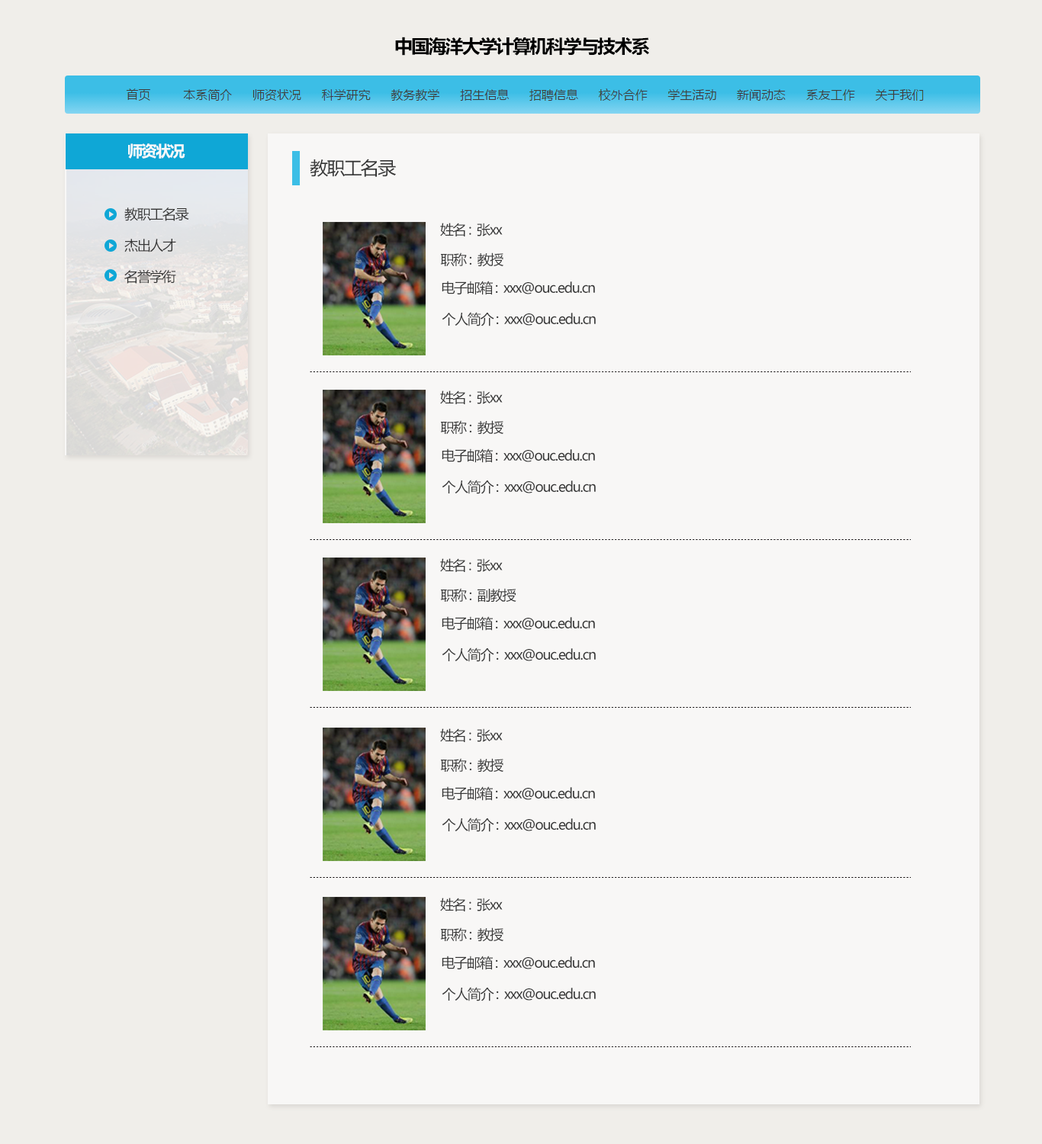
<style>
.page{position:relative;width:1042px;height:1144px;background:#f8f7f6}
.page>*{position:absolute;margin:0}
.t1{font:18.3px "MicrosoftYaHei-Bold";letter-spacing:-0.076em;color:#000000}
.t2{font:15.3px "MicrosoftYaHei-Bold";letter-spacing:-0.076em;color:#f9f9f9}
.t3{font:18.3px "MicrosoftYaHei";letter-spacing:-0.076em;color:#383838}
.t4{font:13.7px "MicrosoftYaHei";letter-spacing:-0.076em;color:#383838}
</style>
<div class="page">
<p class="t1" style="left:395px;top:37px;width:254px;height:19px">中国海洋大学计算机科学与技术系</p>
<p class="t2" style="left:128px;top:143px;width:57px;height:16px">师资状况</p>
<p class="t3" style="left:310px;top:159px;width:86px;height:18px">教职工名录</p>
<p class="t4" style="left:124px;top:207px;width:65px;height:14px">教职工名录</p>
<p class="t4" style="left:440px;top:223px;width:63px;height:13px">姓名 :  张xx</p>
<p class="t4" style="left:124px;top:239px;width:52px;height:14px">杰出人才</p>
<p class="t4" style="left:440px;top:253px;width:63px;height:14px">职称 :  教授</p>
<p class="t4" style="left:124px;top:269px;width:52px;height:15px">名誉学衔</p>
<p class="t4" style="left:442px;top:281px;width:153px;height:14px">电子邮箱 :  xxx@ouc.edu.cn</p>
<p class="t4" style="left:442px;top:312px;width:154px;height:15px">个人简介 :  xxx@ouc.edu.cn</p>
<p class="t4" style="left:440px;top:391px;width:63px;height:13px">姓名 :  张xx</p>
<p class="t4" style="left:440px;top:420px;width:63px;height:15px">职称 :  教授</p>
<p class="t4" style="left:442px;top:449px;width:153px;height:14px">电子邮箱 :  xxx@ouc.edu.cn</p>
<p class="t4" style="left:442px;top:480px;width:154px;height:14px">个人简介 :  xxx@ouc.edu.cn</p>
<p class="t4" style="left:440px;top:558px;width:63px;height:14px">姓名 :  张xx</p>
<p class="t4" style="left:440px;top:588px;width:76px;height:15px">职称 :  副教授</p>
<p class="t4" style="left:442px;top:616px;width:153px;height:15px">电子邮箱 :  xxx@ouc.edu.cn</p>
<p class="t4" style="left:442px;top:648px;width:154px;height:14px">个人简介 :  xxx@ouc.edu.cn</p>
<p class="t4" style="left:440px;top:729px;width:63px;height:13px">姓名 :  张xx</p>
<p class="t4" style="left:440px;top:758px;width:63px;height:15px">职称 :  教授</p>
<p class="t4" style="left:442px;top:787px;width:153px;height:14px">电子邮箱 :  xxx@ouc.edu.cn</p>
<p class="t4" style="left:442px;top:818px;width:154px;height:14px">个人简介 :  xxx@ouc.edu.cn</p>
<p class="t4" style="left:440px;top:898px;width:63px;height:14px">姓名 :  张xx</p>
<p class="t4" style="left:440px;top:928px;width:63px;height:14px">职称 :  教授</p>
<p class="t4" style="left:442px;top:956px;width:153px;height:14px">电子邮箱 :  xxx@ouc.edu.cn</p>
<p class="t4" style="left:442px;top:987px;width:154px;height:15px">个人简介 :  xxx@ouc.edu.cn</p>
</div>
